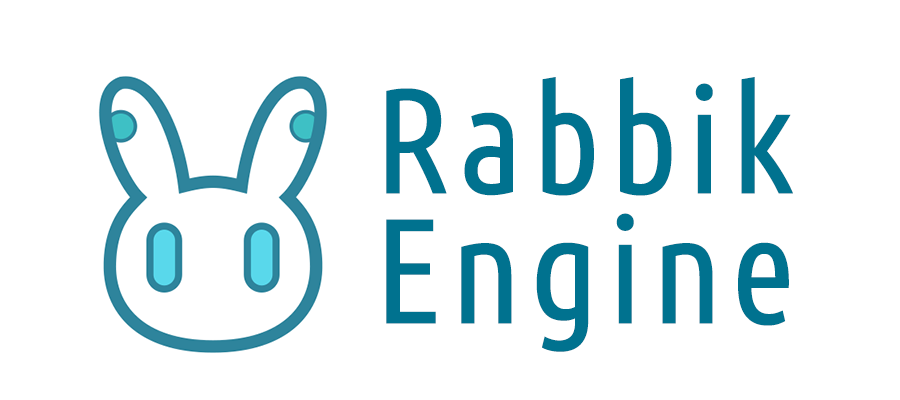
<style>
.page{position:relative;width:900px;height:400px;background:#ffffff}
.page>*{position:absolute;margin:0}
.t1{font:150px/130px "UbuntuCondensed-Regular";letter-spacing:0.05em;color:#00728f}
</style>
<div class="page">
<p class="t1" style="left:386px;top:77px;width:407px;height:275px">Rabbik<br>Engine</p>
</div>
